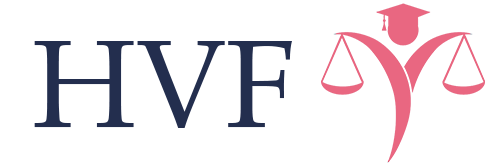
<style>
.page{position:relative;width:503px;height:168px;background:#ffffff}
.page>*{position:absolute;margin:0}
.t1{font:125px "BookAntiqua";color:#232e4e}
</style>
<div class="page">
<p class="t1" style="left:34px;top:41px;width:258px;height:87px">HVF</p>
</div>
